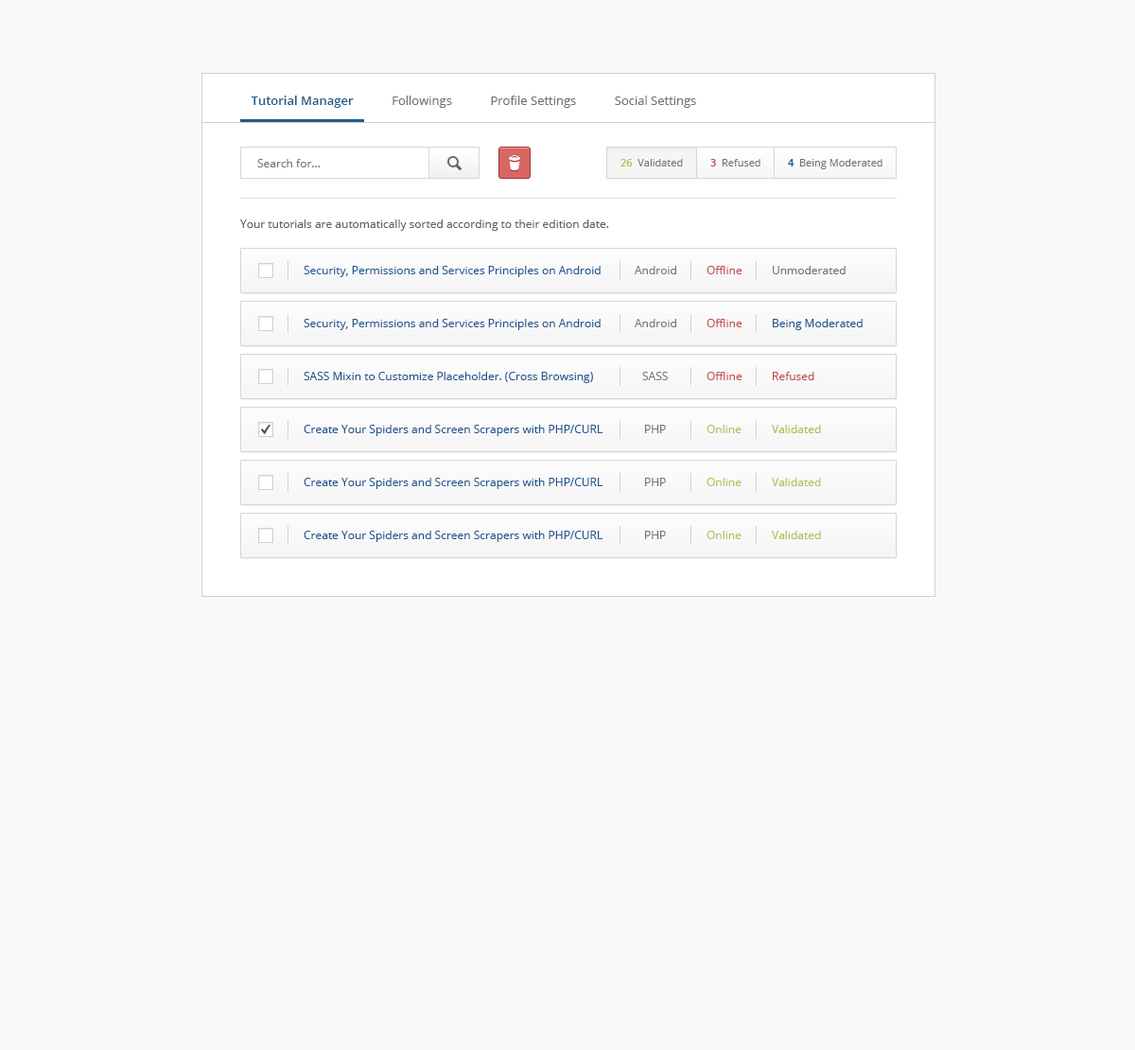
<style>
.page{position:relative;width:1135px;height:1050px;background:#f9f9f9}
.page>*{position:absolute;margin:0}
.t1{font:12.3px "OpenSans";color:#737373}
.t2{font:12.3px "OpenSans-Semibold";color:#205d8b}
.t3{font:11.4px "OpenSans";color:#757575}
.t4{font:10.4px "OpenSans";color:#757575}
.t5{font:10.4px "OpenSans-Semibold";color:#aac55a}
.t6{font:10.4px "OpenSans-Semibold";color:#c34c47}
.t7{font:10.4px "OpenSans-Semibold";color:#1f5691}
.t8{font:11.4px "OpenSans";color:#606060}
.t9{font:11.4px "OpenSans";color:#1f5691}
.t10{font:11.4px "OpenSans";color:#c34c47}
.t11{font:11.4px "OpenSans";color:#aac55a}
</style>
<div class="page">
<p class="t1" style="left:251px;top:96px;width:445px;height:12px"><span class="t2">Tutorial Manager            </span>Followings            Profile Settings            Social Settings</p>
<p class="t3" style="left:257px;top:159px;width:64px;height:8px">Search for...</p>
<p class="t4" style="left:621px;top:159px;width:62px;height:8px"><span class="t5">26</span>  Validated</p>
<p class="t4" style="left:711px;top:159px;width:50px;height:8px"><span class="t6">3</span>  Refused</p>
<p class="t4" style="left:788px;top:159px;width:95px;height:10px"><span class="t7">4</span>  Being Moderated</p>
<p class="t8" style="left:240px;top:220px;width:369px;height:11px">Your tutorials are automatically sorted according to their edition date.</p>
<p class="t9" style="left:304px;top:266px;width:297px;height:11px">Security, Permissions and Services Principles on Android</p>
<p class="t3" style="left:635px;top:266px;width:42px;height:8px">Android</p>
<p class="t10" style="left:707px;top:266px;width:36px;height:8px">Offline</p>
<p class="t3" style="left:773px;top:266px;width:73px;height:8px">Unmoderated</p>
<p class="t9" style="left:304px;top:319px;width:297px;height:11px">Security, Permissions and Services Principles on Android</p>
<p class="t3" style="left:635px;top:319px;width:42px;height:8px">Android</p>
<p class="t10" style="left:707px;top:319px;width:36px;height:8px">Offline</p>
<p class="t9" style="left:773px;top:319px;width:90px;height:11px">Being Moderated</p>
<p class="t9" style="left:304px;top:372px;width:289px;height:11px">SASS Mixin to Customize Placeholder. (Cross Browsing)</p>
<p class="t3" style="left:642px;top:372px;width:26px;height:8px">SASS</p>
<p class="t10" style="left:707px;top:372px;width:36px;height:8px">Offline</p>
<p class="t10" style="left:773px;top:372px;width:42px;height:8px">Refused</p>
<p class="t9" style="left:304px;top:425px;width:300px;height:11px">Create Your Spiders and Screen Scrapers with PHP/CURL</p>
<p class="t3" style="left:645px;top:425px;width:21px;height:8px">PHP</p>
<p class="t11" style="left:707px;top:425px;width:35px;height:8px">Online</p>
<p class="t11" style="left:772px;top:425px;width:49px;height:8px">Validated</p>
<p class="t9" style="left:304px;top:478px;width:300px;height:11px">Create Your Spiders and Screen Scrapers with PHP/CURL</p>
<p class="t3" style="left:645px;top:478px;width:21px;height:8px">PHP</p>
<p class="t11" style="left:707px;top:478px;width:35px;height:8px">Online</p>
<p class="t11" style="left:772px;top:478px;width:49px;height:8px">Validated</p>
<p class="t9" style="left:304px;top:531px;width:300px;height:11px">Create Your Spiders and Screen Scrapers with PHP/CURL</p>
<p class="t3" style="left:645px;top:531px;width:21px;height:8px">PHP</p>
<p class="t11" style="left:707px;top:531px;width:35px;height:8px">Online</p>
<p class="t11" style="left:772px;top:531px;width:49px;height:8px">Validated</p>
</div>
